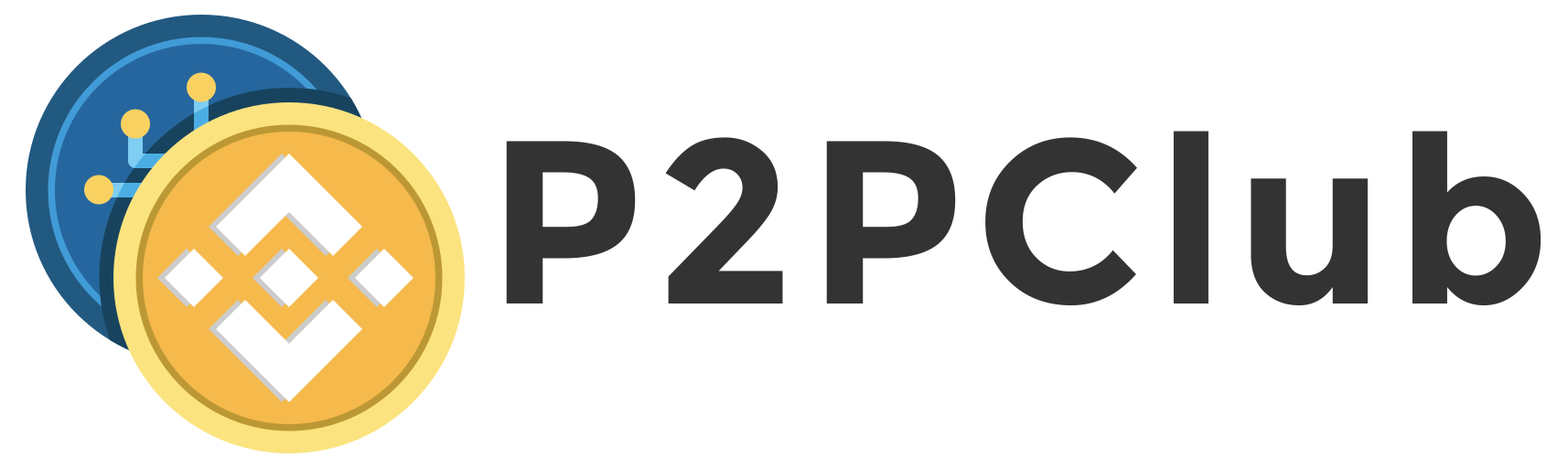
<style>
.page{position:relative;width:1568px;height:468px;background:#ffffff}
.page>*{position:absolute;margin:0}
.t1{font:232.3px "Montserrat-Bold";letter-spacing:0.05em;color:#333333}
</style>
<div class="page">
<p class="t1" style="left:506px;top:131px;width:1035px;height:175px">P2PClub</p>
</div>
